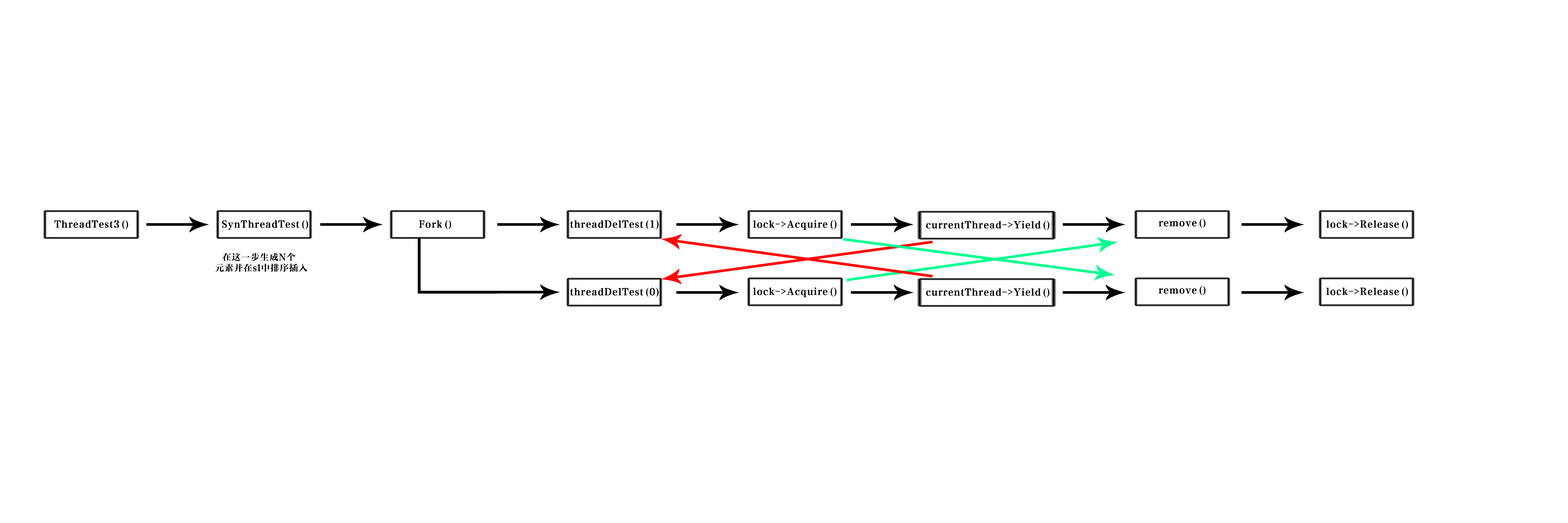
<style>
.page{position:relative;width:1568px;height:523px;background:#ffffff}
.page>*{position:absolute;margin:0}
.t1{font:9.4px "FZCYSK--GBK1-0";letter-spacing:0.06em;color:#000000}
.t2{font:8.9px "FZCYSK--GBK1-0";letter-spacing:0.06em;color:#000000}
</style>
<div class="page">
<p class="t1" style="left:54px;top:220px;width:74px;height:9px">ThreadTest3()</p>
<p class="t1" style="left:222px;top:220px;width:86px;height:10px">SynThreadTest()</p>
<p class="t1" style="left:419px;top:220px;width:32px;height:9px">Fork()</p>
<p class="t1" style="left:570px;top:220px;width:89px;height:9px">threadDelTest(1)</p>
<p class="t1" style="left:753px;top:220px;width:84px;height:10px">lock-&gt;Acquire()</p>
<p class="t1" style="left:926px;top:220px;width:124px;height:10px">currentThread-&gt;Yield()</p>
<p class="t1" style="left:1159px;top:218px;width:47px;height:10px">remove()</p>
<p class="t1" style="left:1326px;top:220px;width:82px;height:9px">lock-&gt;Release()</p>
<p class="t2" style="left:215px;top:253px;width:93px;height:19px;text-align:center">在这一步生成N个 <br>元素并在sl中排序插入</p>
<p class="t1" style="left:570px;top:287px;width:89px;height:10px">threadDelTest(0)</p>
<p class="t1" style="left:753px;top:287px;width:84px;height:10px">lock-&gt;Acquire()</p>
<p class="t1" style="left:926px;top:287px;width:124px;height:10px">currentThread-&gt;Yield()</p>
<p class="t1" style="left:1159px;top:285px;width:47px;height:10px">remove()</p>
<p class="t1" style="left:1326px;top:287px;width:82px;height:10px">lock-&gt;Release()</p>
</div>
